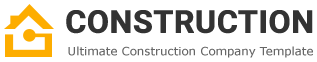
<style>
.page{position:relative;width:317px;height:62px;background:#ffffff}
.page>*{position:absolute;margin:0}
.t1{font:31.3px "Roboto-Bold";letter-spacing:-0.04em;color:#333333;text-transform:uppercase;font-weight:bold}
.t2{font:11.5px "Verdana";color:#666666}
</style>
<div class="page">
<p class="t1" style="left:66px;top:10px;width:247px;height:24px">Construction</p>
<p class="t2" style="left:68px;top:46px;width:245px;height:12px">Ultimate Construction Company Template</p>
</div>
